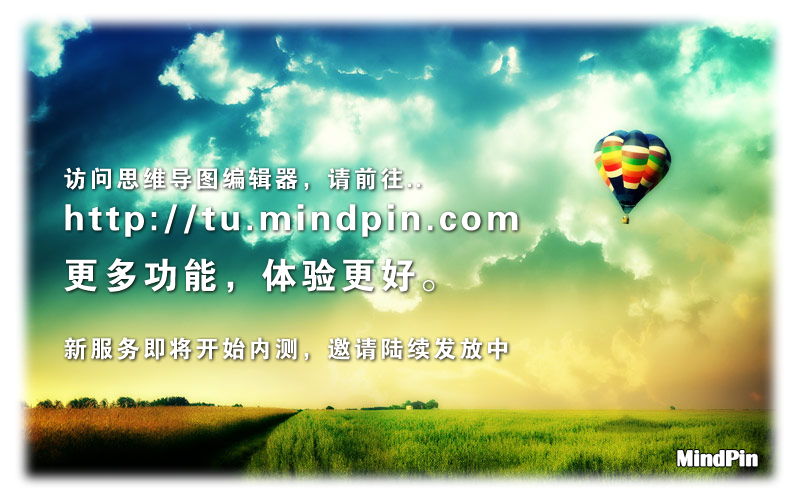
<style>
.page{position:relative;width:800px;height:500px}
.page>*{position:absolute;margin:0}
.t1{font:36px "FZDHTJW--GB1-0";letter-spacing:0.1em;color:#ffffff}
.t2{font:24px "FZDHTJW--GB1-0";letter-spacing:0.1em;color:#ffffff}
</style>
<div class="page">
<p class="t1" style="left:64px;top:167px;width:454px;height:126px"><span class="t2">访问思维导图编辑器，请前往..<br></span>http://tu.mindpin.com<br><br>更多功能，体验更好。</p>
<p class="t2" style="left:64px;top:337px;width:444px;height:24px">新服务即将开始内测，邀请陆续发放中</p>
</div>
